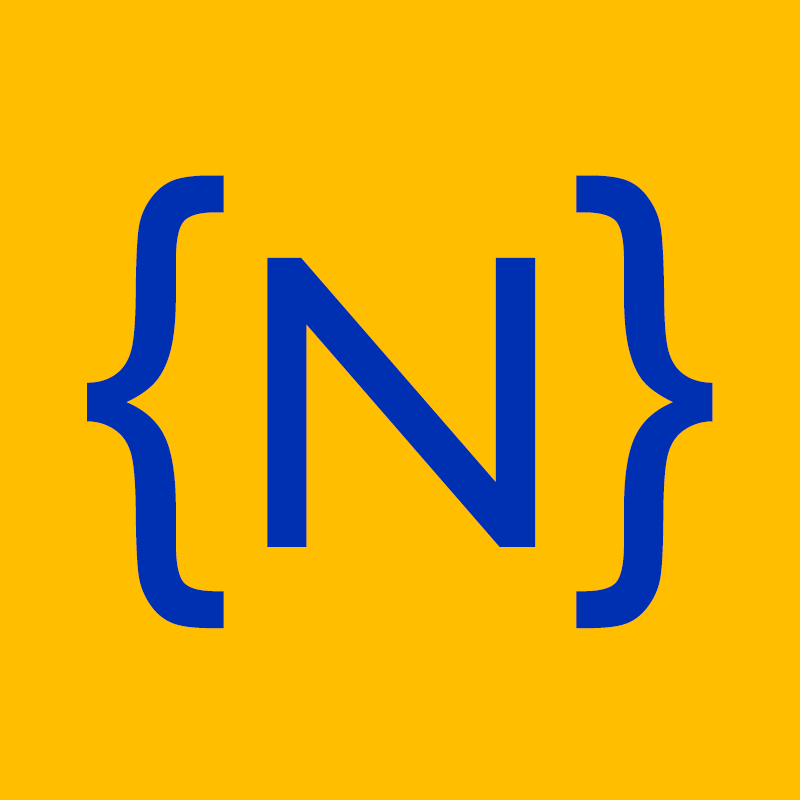
<style>
.page{position:relative;width:800px;height:800px;background:#ffbf00}
.page>*{position:absolute;margin:0}
.t1{font:482.9px "GillSans";color:#0030b2}
.t2{font:423.6px "GillSans";color:#0030b2}
</style>
<div class="page">
<p class="t1" style="left:87px;top:175px;width:626px;height:454px">{<span class="t2">N</span>}</p>
</div>
